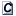
<style>
.page{position:relative;width:16px;height:16px;background:#ffffff}
.page>*{position:absolute;margin:0}
.t1{font:12px "Arial-BoldItalicMT";color:#000000}
</style>
<div class="page">
<p class="t1" style="left:3px;top:2px;width:9px;height:15px">C</p>
</div>
